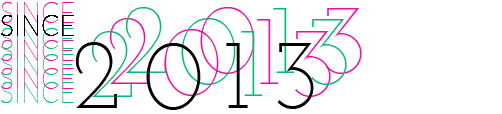
<style>
.page{position:relative;width:502px;height:114px;background:#ffffff}
.page>*{position:absolute;margin:0}
.t1{font:30.2px "Lato-Hairline";color:#ec10a1;scale:0.86 1}
.t2{font:30.2px "Lato-Hairline";color:#000000;scale:0.86 1}
.t3{font:100px "JosefinSlab-Thin";color:#07b974}
.t4{font:100px "JosefinSlab-Thin";color:#ec10a1}
.t5{font:30.2px "Lato-Hairline";color:#07b974;scale:0.86 1}
.t6{font:100px "JosefinSlab-Light";color:#000000}
</style>
<div class="page">
<p class="t1" style="left:1px;top:2px;width:73px;height:21px">SINCE</p>
<p class="t2" style="left:1px;top:15px;width:73px;height:21px">SINCE</p>
<p class="t2" style="left:1px;top:15px;width:73px;height:21px">SINCE</p>
<p class="t2" style="left:1px;top:15px;width:73px;height:21px">SINCE</p>
<p class="t2" style="left:1px;top:15px;width:73px;height:21px">SINCE</p>
<p class="t2" style="left:1px;top:15px;width:73px;height:21px">SINCE</p>
<p class="t3" style="left:125px;top:7px;width:41px;height:66px">2</p>
<p class="t4" style="left:200px;top:7px;width:55px;height:67px">0</p>
<p class="t3" style="left:273px;top:8px;width:22px;height:65px">1</p>
<p class="t4" style="left:326px;top:8px;width:36px;height:66px">3</p>
<p class="t5" style="left:1px;top:28px;width:73px;height:21px">SINCE</p>
<p class="t4" style="left:109px;top:18px;width:41px;height:66px">2</p>
<p class="t4" style="left:164px;top:29px;width:55px;height:67px">0</p>
<p class="t3" style="left:181px;top:18px;width:55px;height:67px">0</p>
<p class="t4" style="left:257px;top:19px;width:22px;height:65px">1</p>
<p class="t3" style="left:311px;top:19px;width:36px;height:66px">3</p>
<p class="t1" style="left:1px;top:40px;width:73px;height:21px">SINCE</p>
<p class="t3" style="left:91px;top:31px;width:41px;height:66px">2</p>
<p class="t3" style="left:241px;top:31px;width:22px;height:65px">1</p>
<p class="t4" style="left:295px;top:31px;width:36px;height:66px">3</p>
<p class="t5" style="left:1px;top:54px;width:73px;height:21px">SINCE</p>
<p class="t6" style="left:75px;top:42px;width:42px;height:66px">2</p>
<p class="t6" style="left:146px;top:43px;width:55px;height:67px">0</p>
<p class="t6" style="left:226px;top:43px;width:22px;height:65px">1</p>
<p class="t6" style="left:277px;top:43px;width:37px;height:66px">3</p>
<p class="t1" style="left:1px;top:68px;width:73px;height:21px">SINCE</p>
<p class="t5" style="left:1px;top:82px;width:73px;height:21px">SINCE</p>
</div>
